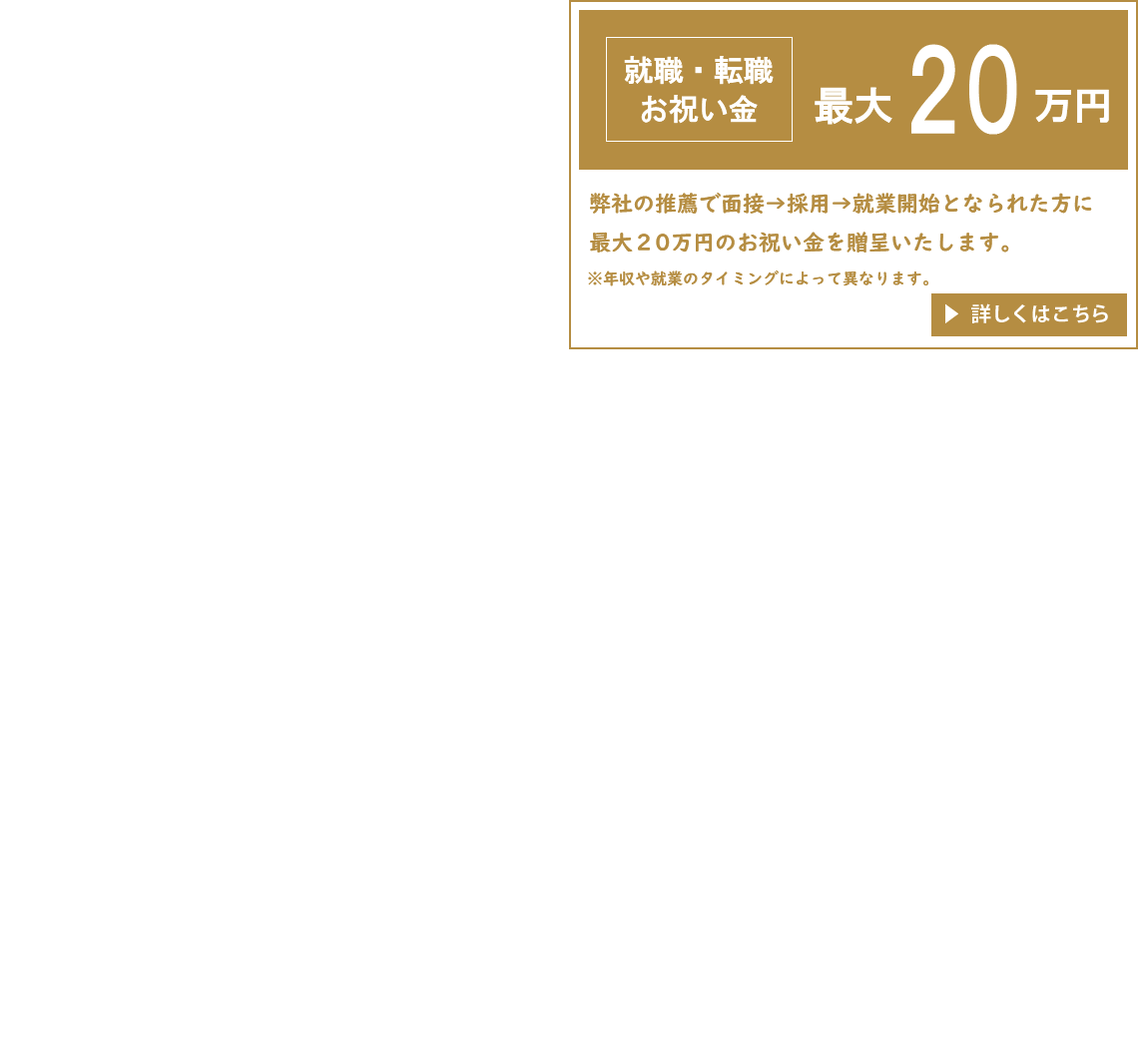
<style>
.page{position:relative;width:1138px;height:1048px;background:#ffffff}
.page>*{position:absolute;margin:0}
.t1{font:111px "HGGothicE";letter-spacing:-0.24em;color:#ffffff;scale:0.72 1}
.t2{font:29.9px/39.1px "HGGothicE";color:#ffffff}
.t3{font:39.9px "HGGothicE";color:#ffffff}
.t4{font:22px/39.1px "UDDigiKyokashoNP-B";color:#b58d42}
.t5{font:16px "UDDigiKyokashoNP-B";color:#b58d42}
.t6{font:20px "KozGoPr6N-Regular";color:#ffffff}
.t7{font:20px "KozGoPr6N-Bold";color:#ffffff}
</style>
<div class="page">
<p class="t1" style="left:911px;top:44px;width:106px;height:91px">２０</p>
<p class="t2" style="left:624px;top:56px;width:150px;height:68px;text-align:center">就職・転職<br>お祝い金</p>
<p class="t3" style="left:814px;top:87px;width:295px;height:38px">最大　　　 万円</p>
<p class="t4" style="left:590px;top:193px;width:502px;height:60px">弊社の推薦で面接→採用→就業開始となられた方に<br>最大２0万円のお祝い金を贈呈いたします。</p>
<p class="t5" style="left:588px;top:270px;width:340px;height:16px">※年収や就業のタイミングによって異なります。</p>
<p class="t6" style="left:945px;top:303px;width:13px;height:20px">▶</p>
<p class="t7" style="left:971px;top:303px;width:137px;height:20px">詳しくはこちら</p>
</div>
